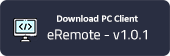
<style>
.page{position:relative;width:170px;height:56px;background:#292e41}
.page>*{position:absolute;margin:0}
.t1{font:10px "Calibri-Bold";color:#ffffff}
.t2{font:14px "Cairo-Regular";color:#ffffff}
</style>
<div class="page">
<p class="t1" style="left:57px;top:15px;width:81px;height:7px">Download PC Client</p>
<p class="t2" style="left:47px;top:29px;width:100px;height:11px">eRemote - v1.0.1</p>
</div>
